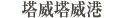
<style>
.page{position:relative;width:124px;height:18px;background:#ffffff}
.page>*{position:absolute;margin:0}
.t1{font:18px "RyuminPro-ExBold";color:#4c4843;scale:0.9 1}
</style>
<div class="page">
<p class="t1" style="left:21px;top:0px;width:81px;height:18px">塔威塔威港</p>
</div>
